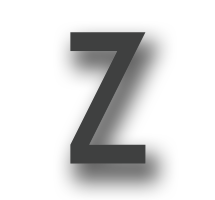
<style>
.page{position:relative;width:215px;height:200px;background:#ffffff}
.page>*{position:absolute;margin:0}
.t1{font:150px "Manteka";color:#3f4040}
</style>
<div class="page">
<p class="t1" style="left:70px;top:32px;width:76px;height:132px">Z</p>
</div>
